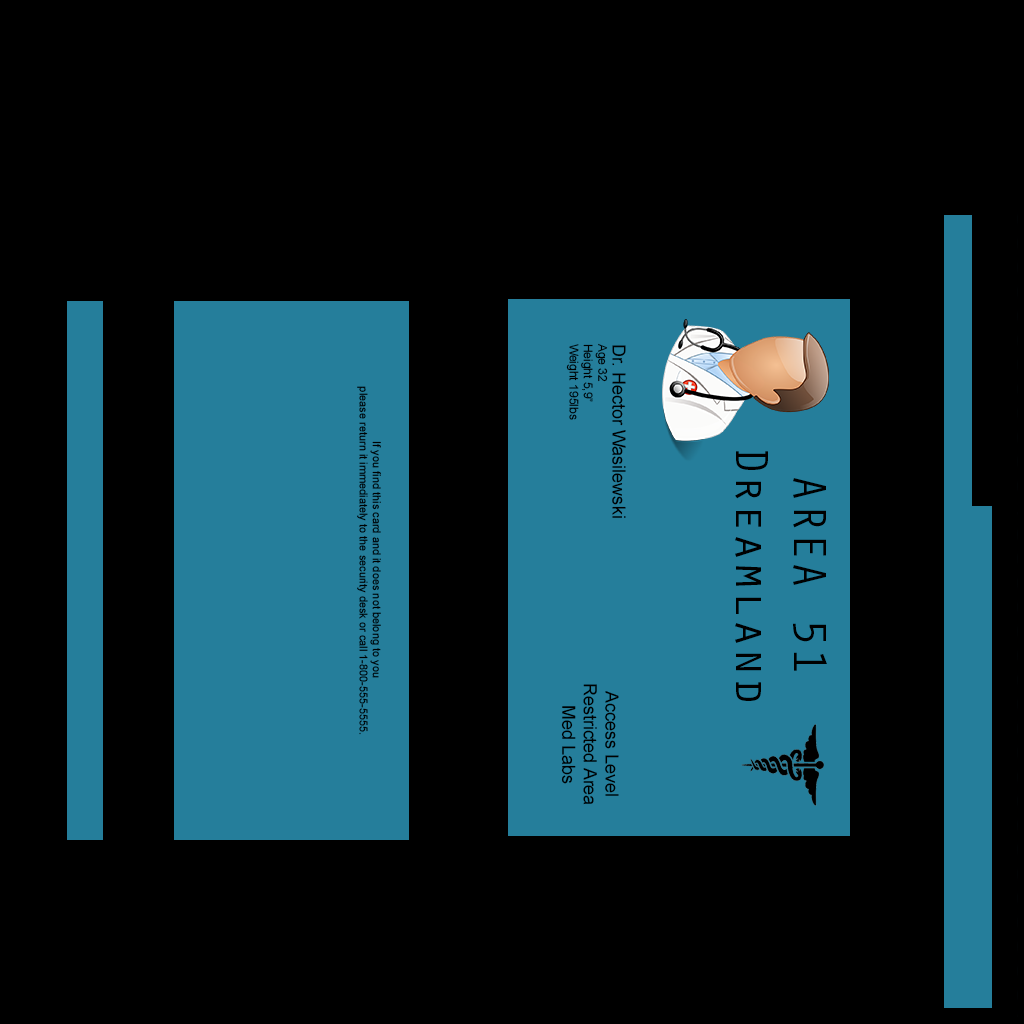
<style>
.page{position:relative;width:1024px;height:1024px;background:#000000}
.page>*{position:absolute;margin:0}
.t1{font:12px "ArialMT";color:#000000}
.t2{font:18px "ArialMT";color:#000000}
.t3{font:11px "ArialMT";color:#000000}
.t4{font:47.8px "OratorStd";color:#000000}
</style>
<div class="page">
<p class="t1" style="left:566px;top:343px;width:60px;height:175px;rotate:90deg"><span class="t2">Dr. Hector Wasilewski<br></span>Age 32<br>Height 5,9”<br>Weight 195lbs</p>
<p class="t3" style="left:357px;top:386px;width:24px;height:349px;text-align:center;rotate:90deg">If you find this card and it does not belong to you <br>please return it immediately to the security desk or call 1-800-555-5555.</p>
<p class="t4" style="left:735px;top:451px;width:92px;height:250px;text-align:center;rotate:90deg">AREA 51<br>Dreamland</p>
<p class="t2" style="left:561px;top:684px;width:58px;height:121px;text-align:center;rotate:90deg">Access Level<br>Restricted Area<br>Med Labs</p>
</div>
